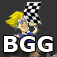
<style>
.page{position:relative;width:57px;height:57px;background:#333333}
.page>*{position:absolute;margin:0}
.t1{font:22px "Verdana-Bold";color:#ffffff}
</style>
<div class="page">
<p class="t1" style="left:4px;top:36px;width:49px;height:16px">BGG</p>
</div>
